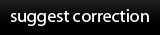
<style>
.page{position:relative;width:160px;height:35px;background:#000000}
.page>*{position:absolute;margin:0}
.t1{font:18px "MyriadPro-Regular";color:#ffffff}
</style>
<div class="page">
<p class="t1" style="left:10px;top:9px;width:139px;height:17px">suggest correction</p>
</div>
